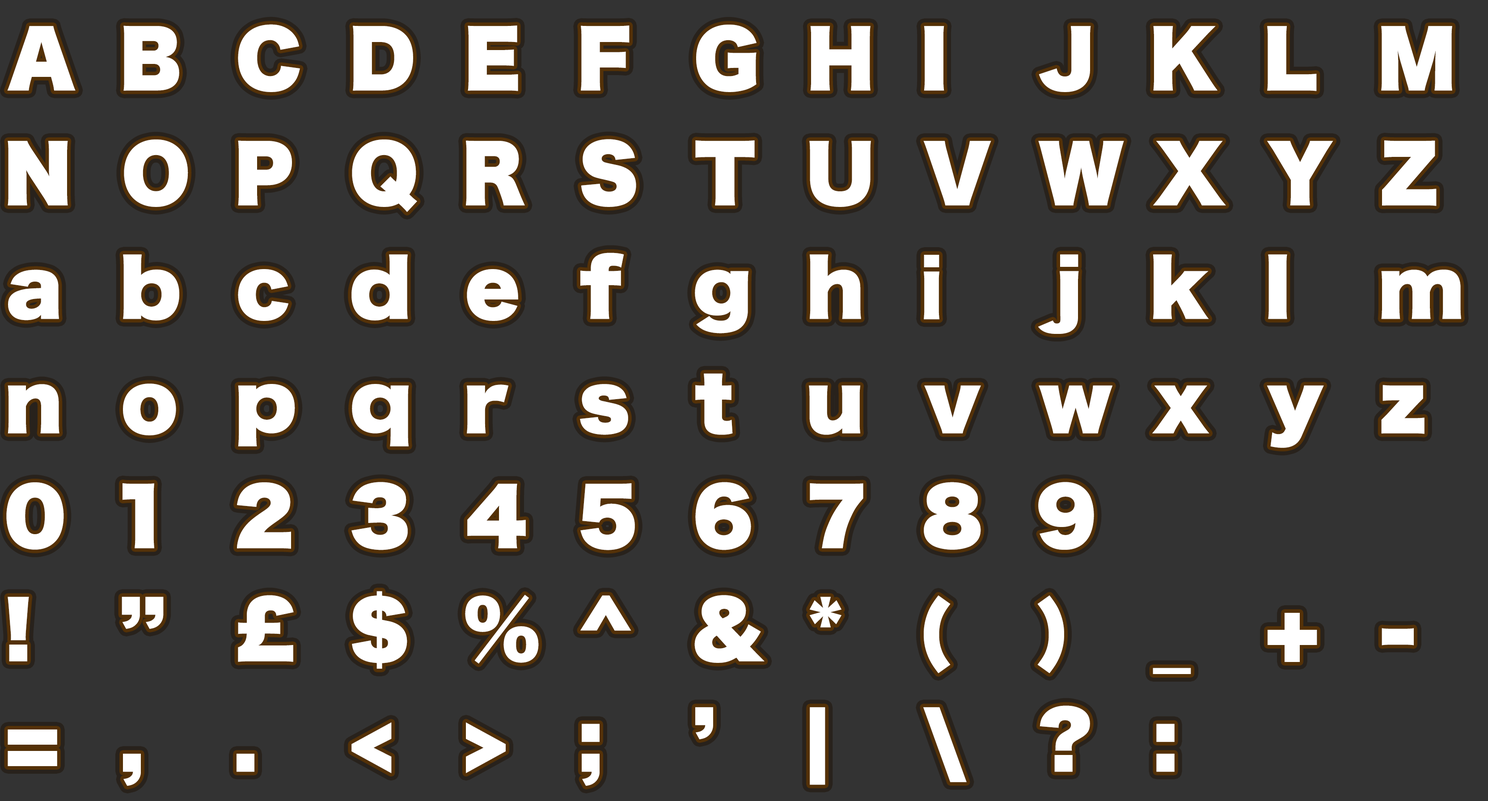
<style>
.page{position:relative;width:1488px;height:801px;background:#333333}
.page>*{position:absolute;margin:0}
.t1{font:75.4px "HiraginoSans-W9";letter-spacing:0.58em;color:#ffffff}
.t2{font:75.4px "HiraginoSans-W9";letter-spacing:0.72em;color:#ffffff}
.t3{font:75.4px "HiraginoSans-W9";letter-spacing:0.62em;color:#ffffff}
.t4{font:75.4px "HiraginoSans-W9";letter-spacing:0.64em;color:#ffffff}
.t5{font:75.4px "HiraginoSans-W9";letter-spacing:0.74em;color:#ffffff}
.t6{font:75.4px "HiraginoSans-W9";letter-spacing:0.84em;color:#ffffff}
.t7{font:75.4px "HiraginoSans-W9";letter-spacing:0.6em;color:#ffffff}
.t8{font:75.4px "HiraginoSans-W9";letter-spacing:1.2em;color:#ffffff}
.t9{font:75.4px "HiraginoSans-W9";letter-spacing:0.8em;color:#ffffff}
.t10{font:75.4px "HiraginoSans-W9";color:#ffffff}
.t11{font:75.4px "HiraginoSans-W9";letter-spacing:0.66em;color:#ffffff}
.t12{font:75.4px "HiraginoSans-W9";letter-spacing:0.56em;color:#ffffff}
.t13{font:75.4px "HiraginoSans-W9";letter-spacing:0.7em;color:#ffffff}
.t14{font:75.4px "HiraginoSans-W9";letter-spacing:0.38em;color:#ffffff}
.t15{font:75.4px "HiraginoSans-W9";letter-spacing:0.54em;color:#ffffff}
.t16{font:75.4px "HiraginoSans-W9";letter-spacing:0.76em;color:#ffffff}
.t17{font:75.4px "HiraginoSans-W9";letter-spacing:0.92em;color:#ffffff}
.t18{font:75.4px "HiraginoSans-W9";letter-spacing:1.36em;color:#ffffff}
.t19{font:75.4px "HiraginoSans-W9";letter-spacing:0.88em;color:#ffffff}
.t20{font:75.4px "HiraginoSans-W9";letter-spacing:1.16em;color:#ffffff}
.t21{font:75.4px "HiraginoSans-W9";letter-spacing:0.78em;color:#ffffff}
.t22{font:75.4px "HiraginoSans-W9";letter-spacing:0.68em;color:#ffffff}
.t23{font:75.4px "HiraginoSans-W9";letter-spacing:0.86em;color:#ffffff}
.t24{font:75.4px "HiraginoSans-W9";letter-spacing:0.96em;color:#ffffff}
.t25{font:75.4px "HiraginoSans-W9";letter-spacing:0.52em;color:#ffffff}
.t26{font:75.4px "HiraginoSans-W9";letter-spacing:1.12em;color:#ffffff}
.t27{font:75.4px "HiraginoSans-W9";letter-spacing:0.98em;color:#ffffff}
.t28{font:75.4px "HiraginoSans-W9";letter-spacing:1.08em;color:#ffffff}
.t29{font:75.4px "HiraginoSans-W9";letter-spacing:1.22em;color:#ffffff}
.t30{font:75.4px "HiraginoSans-W9";letter-spacing:0.9em;color:#ffffff}
.t31{font:75.4px "HiraginoSans-W9";letter-spacing:0.94em;color:#ffffff}
.t32{font:75.4px "HiraginoSans-W9";letter-spacing:1.14em;color:#ffffff}
</style>
<div class="page">
<p class="t1" style="left:7px;top:24px;width:1445px;height:68px">A<span class="t2">B</span><span class="t3">C</span><span class="t4">D</span><span class="t5">E</span><span class="t6">F</span><span class="t3">G</span><span class="t7">H</span><span class="t8">I</span><span class="t2">J</span><span class="t7">K</span><span class="t9">L</span><span class="t10">M</span></p>
<p class="t11" style="left:8px;top:139px;width:1429px;height:73px">N<span class="t1">O</span><span class="t5">P</span><span class="t12">Q</span><span class="t13">R</span><span class="t5">S</span>T<span class="t4">U</span><span class="t3">V</span><span class="t14">W</span><span class="t15">X</span><span class="t3">Y</span><span class="t1">Z</span></p>
<p class="t16" style="left:8px;top:253px;width:1453px;height:81px">a<span class="t5">b</span><span class="t9">c</span><span class="t2">d</span><span class="t9">e</span><span class="t17">f</span><span class="t2">g</span><span class="t4">h</span><span class="t18">i</span><span class="t19">j</span><span class="t5">k</span><span class="t20">l</span><span class="t4">m</span></p>
<p class="t21" style="left:8px;top:373px;width:1417px;height:75px">n<span class="t16">o</span><span class="t2">p</span><span class="t22">q</span><span class="t17">r</span><span class="t23">s</span><span class="t24">t</span><span class="t9">u</span><span class="t16">v</span><span class="t25">w</span><span class="t16">x</span><span class="t5">y</span><span class="t16">z</span></p>
<p class="t3" style="left:6px;top:482px;width:1088px;height:68px">0<span class="t9">1</span><span class="t2">2</span><span class="t5">3</span><span class="t11">4</span><span class="t2">5</span><span class="t13">6</span><span class="t2">7</span><span class="t13">8</span><span class="t21">9</span></p>
<p class="t26" style="left:8px;top:591px;width:1406px;height:83px">!<span class="t23">”</span><span class="t22">£</span><span class="t13">$</span><span class="t25">%</span><span class="t9">^</span><span class="t1">&amp;</span><span class="t27">*</span>(<span class="t28">)</span><span class="t27">_</span><span class="t21">+</span><span class="t3">-</span></p>
<p class="t21" style="left:8px;top:706px;width:1167px;height:80px">=<span class="t20">,</span><span class="t29">.</span><span class="t30">&lt;</span><span class="t31">&gt;</span><span class="t20">;</span><span class="t28">’</span><span class="t32">|</span><span class="t31">\</span><span class="t9">?</span><span class="t28">:</span></p>
</div>
